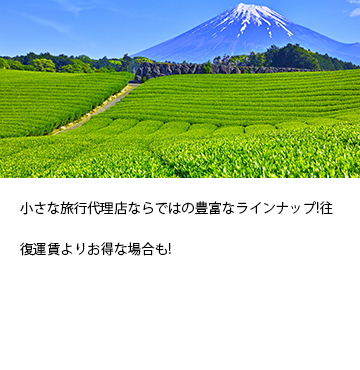
<style>
.page{position:relative;width:360px;height:370px;background:#ffffff}
.page>*{position:absolute;margin:0}
.t1{font:13.3px/41.7px "KozGoPr6N-Regular";letter-spacing:0.01em;color:#000000}
</style>
<div class="page">
<p class="t1" style="left:20px;top:201px;width:313px;height:55px">小さな旅行代理店ならではの豊富なラインナップ!往復運賃よりお得な場合も!</p>
</div>
